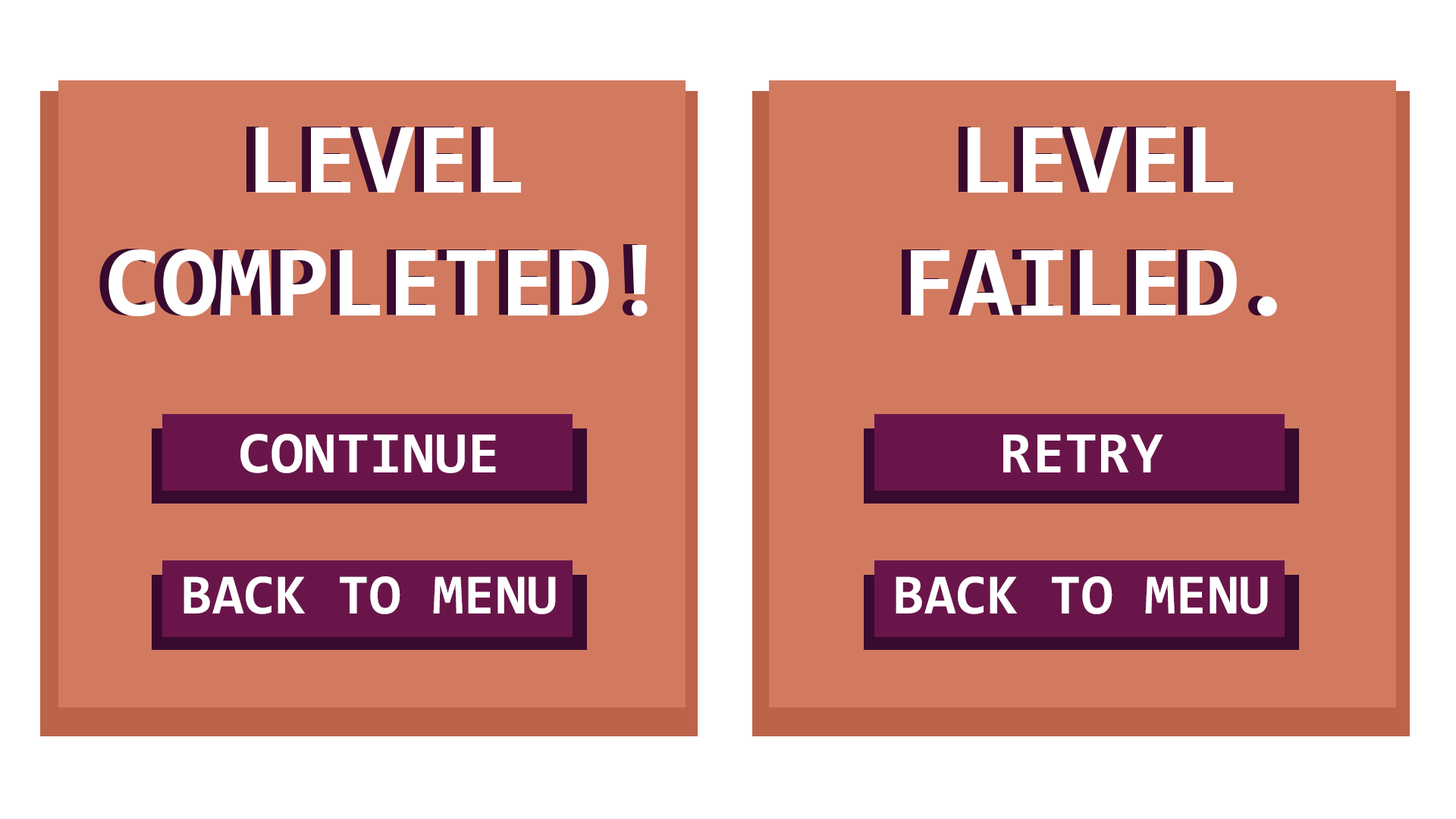
<style>
.page{position:relative;width:1456px;height:819px;background:#d27a60}
.page>*{position:absolute;margin:0}
.t1{font:102.4px "Consolas-Bold"}
.t2{font:102.4px "Consolas-Bold";color:#ffffff}
.t3{font:59.5px "Consolas-Bold";color:#ffffff}
.t4{font:57.2px "Consolas-Bold";color:#ffffff}
</style>
<div class="page">
<p class="t1" style="left:99px;top:127px;width:540px;height:188px;text-align:center">LEVEL<br>COMPLETED!</p>
<p class="t2" style="left:108px;top:127px;width:540px;height:189px;text-align:center">LEVEL<br>COMPLETED!</p>
<p class="t1" style="left:902px;top:127px;width:366px;height:188px;text-align:center">LEVEL<br>FAILED.</p>
<p class="t2" style="left:911px;top:127px;width:366px;height:189px;text-align:center">LEVEL<br>FAILED.</p>
<p class="t3" style="left:240px;top:434px;width:256px;height:39px">CONTINUE</p>
<p class="t3" style="left:1003px;top:435px;width:160px;height:37px">RETRY</p>
<p class="t4" style="left:184px;top:576px;width:372px;height:38px">BACK TO MENU</p>
<p class="t4" style="left:896px;top:576px;width:372px;height:38px">BACK TO MENU</p>
</div>
